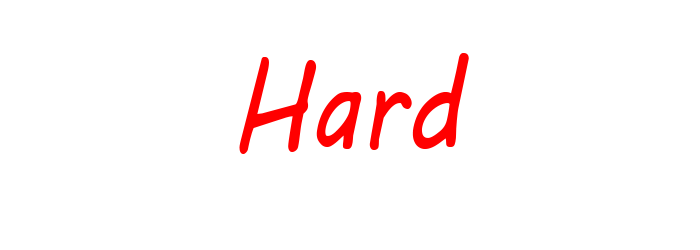
<style>
.page{position:relative;width:700px;height:250px;background:#ffffff}
.page>*{position:absolute;margin:0}
.t1{font:125px "MVBoli";color:#ff0000;scale:0.84 1}
</style>
<div class="page">
<p class="t1" style="left:239px;top:53px;width:230px;height:101px">Hard</p>
</div>
